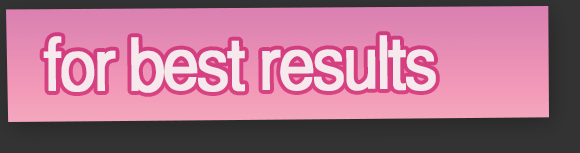
<style>
.page{position:relative;width:580px;height:153px}
.page>*{position:absolute;margin:0}
.t1{font:72px "Helvetica-Normal";letter-spacing:-0.06em;color:#f5e9ee;font-weight:bold;scale:0.9 1}
</style>
<div class="page">
<p class="t1" style="left:43px;top:35px;width:393px;height:58px">for best results</p>
</div>
